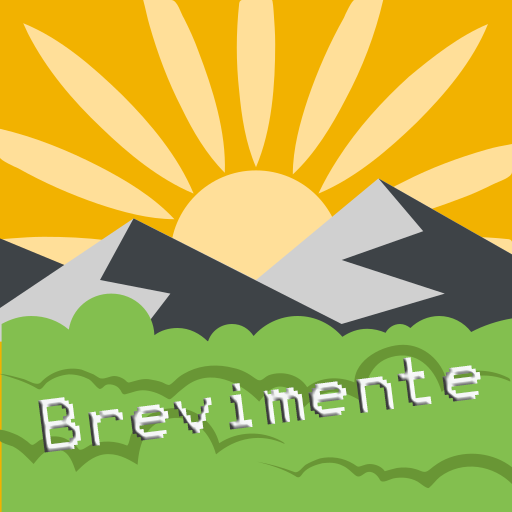
<style>
.page{position:relative;width:512px;height:512px;background:#83bf4f}
.page>*{position:absolute;margin:0}
.t1{font:60px "Terminal"}
</style>
<div class="page">
<p class="t1" style="left:38px;top:357px;width:443px;height:96px;rotate:-7deg">Brevimente</p>
</div>
